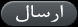
<style>
.page{position:relative;width:78px;height:27px}
.page>*{position:absolute;margin:0}
.t1{font:20px "BNazanin";color:#f7f7f7;scale:1.39 1}
</style>
<div class="page">
<p class="t1" style="left:16px;top:4px;width:47px;height:18px">ارسال</p>
</div>
